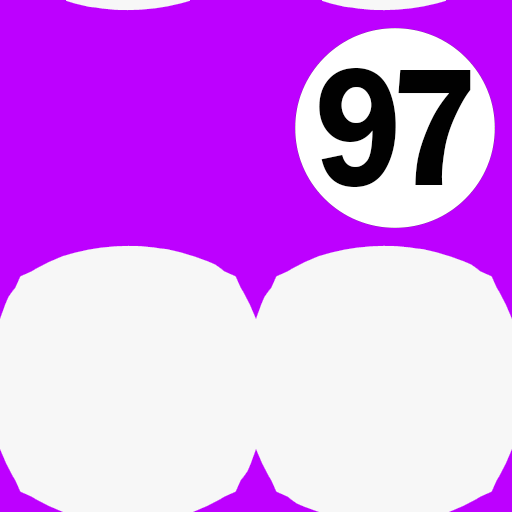
<style>
.page{position:relative;width:512px;height:512px;background:#f7f7f7}
.page>*{position:absolute;margin:0}
.t1{font:172.5px "FranklinGothic-Demi";letter-spacing:-0.05em;color:#010101;scale:0.87 1}
</style>
<div class="page">
<p class="t1" style="left:319px;top:68px;width:152px;height:119px">97</p>
</div>
